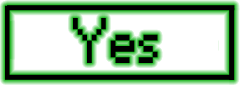
<style>
.page{position:relative;width:240px;height:85px;background:#ffffff}
.page>*{position:absolute;margin:0}
.t1{font:60px "Small Fonts";color:#000000}
</style>
<div class="page">
<p class="t1" style="left:73px;top:18px;width:85px;height:45px">Yes</p>
</div>
